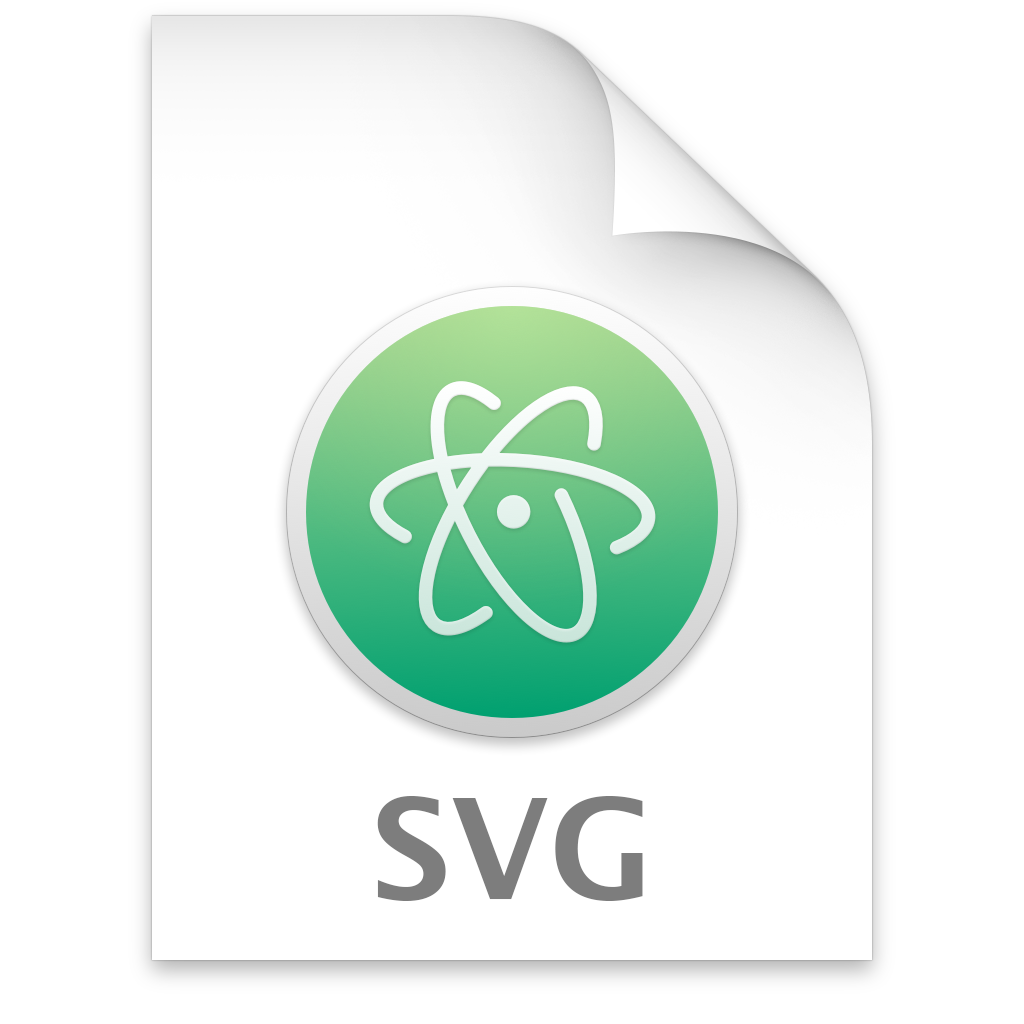
<style>
.page{position:relative;width:1024px;height:1024px;background:#ffffff}
.page>*{position:absolute;margin:0}
.t1{font:140px "LucidaGrande-Bold";color:#7d7d7d}
</style>
<div class="page">
<p class="t1" style="left:377px;top:796px;width:266px;height:105px">SVG</p>
</div>
